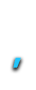
<style>
.page{position:relative;width:36px;height:90px;background:#ffffff}
.page>*{position:absolute;margin:0}
.t1{font:36px "Sarala-Bold";letter-spacing:0.005em;color:#21c6fc}
</style>
<div class="page">
<p class="t1" style="left:13px;top:57px;width:8px;height:11px">,</p>
</div>
